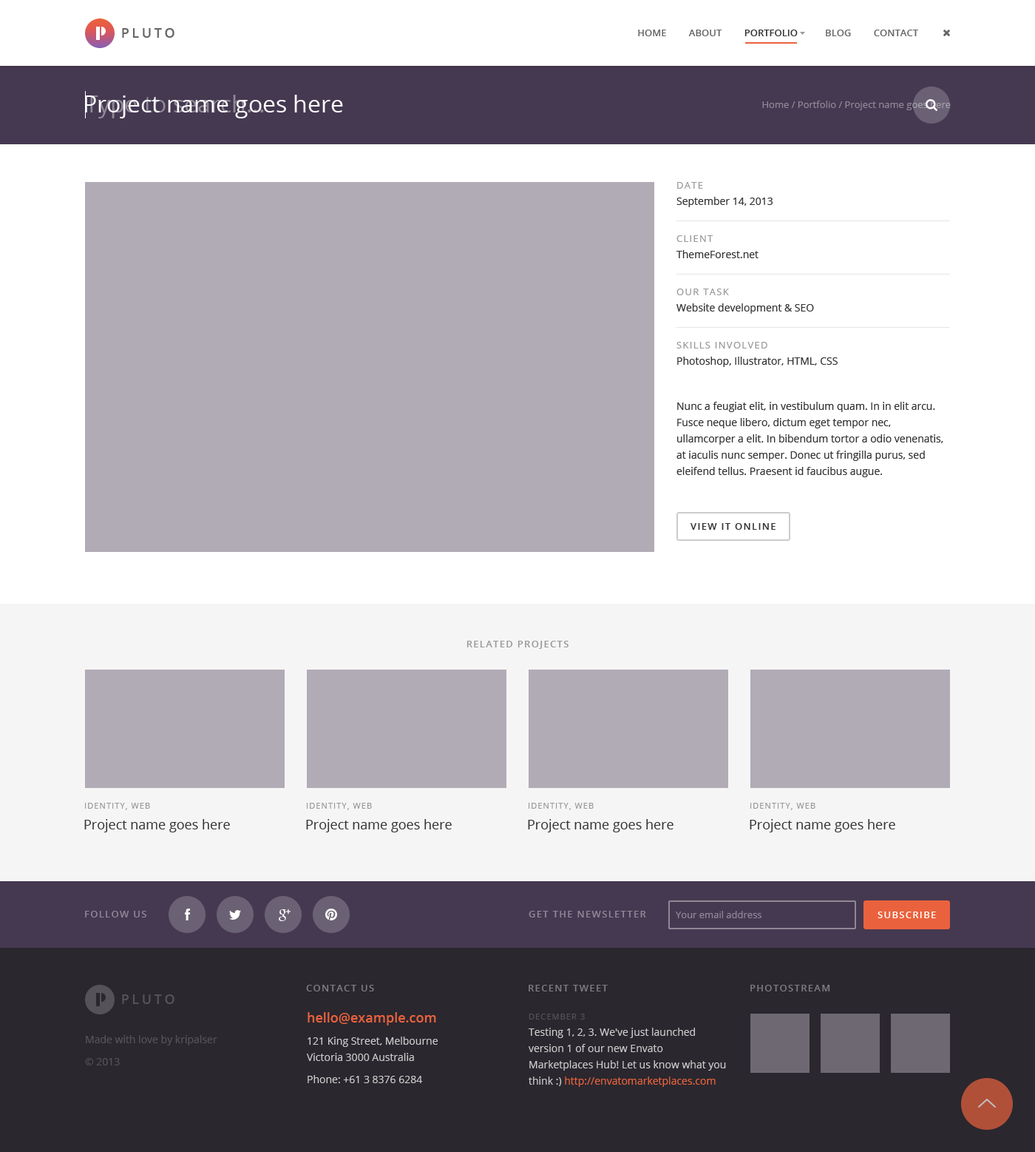
<style>
.page{position:relative;width:1035px;height:1152px;background:#b1abb6}
.page>*{position:absolute;margin:0}
.t1{font:13.3px "OpenSans-Semibold";letter-spacing:0.2em;color:#666666;text-transform:uppercase}
.t2{font:9.6px "OpenSans-Semibold";color:#666666;text-transform:uppercase}
.t3{font:9.6px "OpenSans-Semibold";color:#333333;text-transform:uppercase}
.t4{font:23.7px "OpenSans";color:#ffffff}
.t5{font:23.7px "OpenSans"}
.t6{font:9.6px "OpenSans";color:#8f8897}
.t7{font:10.4px/16.3px "OpenSans";color:#333333}
.t8{font:9.6px/16.3px "OpenSans";letter-spacing:0.1em;color:#999999;text-transform:uppercase}
.t9{font:9.6px "OpenSans-Semibold";letter-spacing:0.1em;color:#333333;text-transform:uppercase}
.t10{font:9.6px "OpenSans-Semibold";letter-spacing:0.1em;color:#999999;text-transform:uppercase}
.t11{font:8.1px "OpenSans";letter-spacing:0.1em;color:#999999;text-transform:uppercase}
.t12{font:13.3px "OpenSans";color:#333333}
.t13{font:9.6px "OpenSans-Semibold";letter-spacing:0.1em;color:#8f8897;text-transform:uppercase}
.t14{font:9.6px "OpenSans-Semibold";letter-spacing:0.1em;color:#ffffff;text-transform:uppercase}
.t15{font:9.6px "OpenSans-Semibold";letter-spacing:0.1em;color:#7f7d82;text-transform:uppercase}
.t16{font:13.3px "OpenSans-Semibold";letter-spacing:0.2em;color:#555258;text-transform:uppercase}
.t17{font:10.4px/22.2px "OpenSans";color:#cccccc}
.t18{font:13.3px/17.8px "OpenSans-Semibold";color:#ea623d}
.t19{font:10.4px/16.3px "OpenSans";color:#cccccc}
.t20{font:8.1px "OpenSans";letter-spacing:0.1em;color:#545158;text-transform:uppercase}
.t21{font:10.4px/22.2px "OpenSans";color:#555258}
.t22{font:10.4px/17px "OpenSans";color:#cccccc}
.t23{font:10.4px/16.3px "OpenSans";color:#ea623d}
</style>
<div class="page">
<p class="t1" style="left:122px;top:28px;width:53px;height:10px">Pluto</p>
<p class="t2" style="left:638px;top:30px;width:281px;height:6px">Home         About         <span class="t3">Portfolio           </span>Blog         Contact</p>
<p class="t4" style="left:85px;top:95px;width:258px;height:23px">Project name goes here</p>
<p class="t5" style="left:85px;top:95px;width:179px;height:23px">Type to search...</p>
<p class="t6" style="left:763px;top:101px;width:188px;height:9px">Home / Portfolio / Project name goes here</p>
<p class="t7" style="left:677px;top:182px;width:96px;height:25px"><span class="t8">Date<br></span>September 14, 2013</p>
<p class="t7" style="left:677px;top:235px;width:82px;height:23px"><span class="t8">Client<br></span>ThemeForest.net</p>
<p class="t7" style="left:677px;top:288px;width:137px;height:26px"><span class="t8">Our task<br></span>Website development &amp; SEO</p>
<p class="t7" style="left:677px;top:342px;width:161px;height:25px"><span class="t8">Skills involved<br></span>Photoshop, Illustrator, HTML, CSS</p>
<p class="t7" style="left:677px;top:402px;width:267px;height:75px">Nunc a feugiat elit, in vestibulum quam. In in elit arcu. Fusce neque libero, dictum eget tempor nec, ullamcorper a elit. In bibendum tortor a odio venenatis, at iaculis nunc semper. Donec ut fringilla purus, sed eleifend tellus. Praesent id faucibus augue.</p>
<p class="t9" style="left:691px;top:523px;width:85px;height:7px">View it online</p>
<p class="t10" style="left:467px;top:641px;width:102px;height:8px">Related projects</p>
<p class="t11" style="left:85px;top:802px;width:65px;height:8px">Identity, Web</p>
<p class="t11" style="left:307px;top:802px;width:65px;height:8px">Identity, Web</p>
<p class="t11" style="left:529px;top:802px;width:65px;height:8px">Identity, Web</p>
<p class="t11" style="left:751px;top:802px;width:65px;height:8px">Identity, Web</p>
<p class="t12" style="left:84px;top:819px;width:146px;height:13px">Project name goes here</p>
<p class="t12" style="left:306px;top:819px;width:146px;height:13px">Project name goes here</p>
<p class="t12" style="left:528px;top:819px;width:146px;height:13px">Project name goes here</p>
<p class="t12" style="left:750px;top:819px;width:146px;height:13px">Project name goes here</p>
<p class="t13" style="left:85px;top:910px;width:61px;height:7px">Follow us</p>
<p class="t13" style="left:529px;top:910px;width:117px;height:7px">Get the newsletter</p>
<p class="t6" style="left:676px;top:910px;width:86px;height:8px">Your email address</p>
<p class="t14" style="left:878px;top:911px;width:58px;height:7px">Subscribe</p>
<p class="t15" style="left:306px;top:984px;width:68px;height:7px">Contact us</p>
<p class="t15" style="left:529px;top:984px;width:79px;height:7px">Recent tweet</p>
<p class="t15" style="left:751px;top:984px;width:80px;height:7px">Photostream</p>
<p class="t16" style="left:122px;top:994px;width:53px;height:10px">Pluto</p>
<p class="t17" style="left:307px;top:1012px;width:131px;height:71px"><span class="t18">hello@example.com<br></span>121 King Street, Melbourne <br><span class="t19">Victoria 3000 Australia<br></span>Phone: +61 3 8376 6284</p>
<p class="t20" style="left:529px;top:1013px;width:56px;height:6px">December 3</p>
<p class="t21" style="left:85px;top:1035px;width:132px;height:30px">Made with love by kripalser<br>© 2013</p>
<p class="t19" style="left:529px;top:1027px;width:197px;height:60px"><span class="t22">Testing 1, 2, 3. We've just launched </span>version 1 of our new Envato Marketplaces Hub! Let us know what you think :) <span class="t23">http://envatomarketplaces.com</span></p>
</div>
